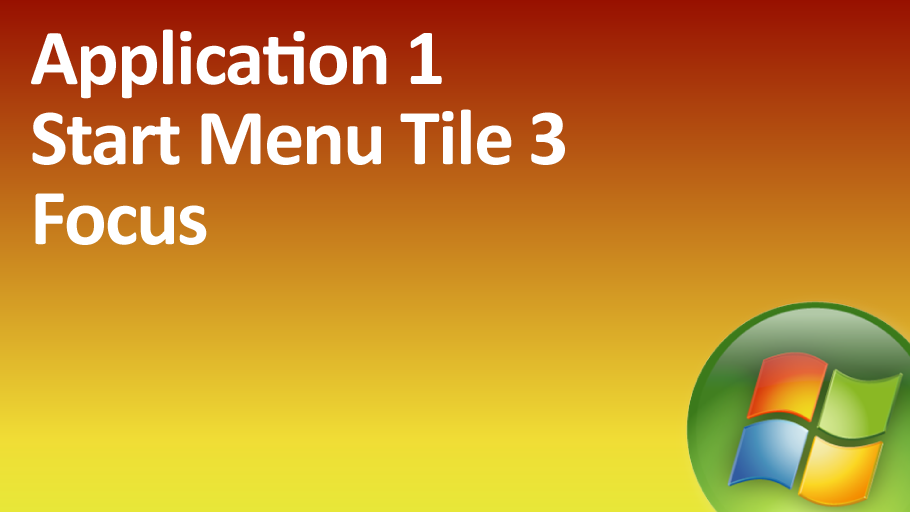
<style>
.page{position:relative;width:910px;height:512px}
.page>*{position:absolute;margin:0}
.t1{font:80px/80px "Calibri-Bold";letter-spacing:-0.025em;color:#ffffff}
</style>
<div class="page">
<p class="t1" style="left:31px;top:29px;width:534px;height:216px">Application 1<br>Start Menu Tile 3<br>Focus</p>
</div>
